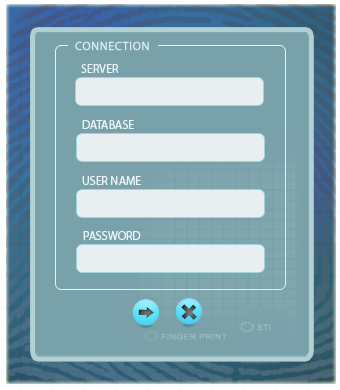
<style>
.page{position:relative;width:340px;height:390px;background:#79a1aa}
.page>*{position:absolute;margin:0}
.t1{font:12px "MyriadPro-Regular";letter-spacing:0.05em;color:#ddedf1}
.t2{font:12px "MyriadPro-Regular";color:#ecf5f7}
.t3{font:7.5px "ArialMT";letter-spacing:0.05em;color:#9fbbc2;scale:1.15 1}
.t4{font:7.5px "ArialMT";letter-spacing:0.05em;color:#9ebac1;scale:1.15 1}
</style>
<div class="page">
<p class="t1" style="left:75px;top:41px;width:74px;height:10px">CONNECTION</p>
<p class="t2" style="left:81px;top:64px;width:38px;height:9px">SERVER</p>
<p class="t2" style="left:82px;top:120px;width:52px;height:9px">DATABASE</p>
<p class="t2" style="left:82px;top:176px;width:59px;height:9px">USER NAME</p>
<p class="t2" style="left:83px;top:231px;width:58px;height:9px">PASSWORD</p>
<p class="t3" style="left:257px;top:324px;width:14px;height:7px">STI</p>
<p class="t4" style="left:161px;top:333px;width:66px;height:7px">FINGER PRINT</p>
</div>
